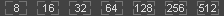
<style>
.page{position:relative;width:224px;height:16px;background:#424242}
.page>*{position:absolute;margin:0}
.t1{font:11px "ArialMT";color:#dcdcdc}
</style>
<div class="page">
<p class="t1" style="left:14px;top:4px;width:202px;height:8px">8 16 32 64 128 256 512</p>
</div>
